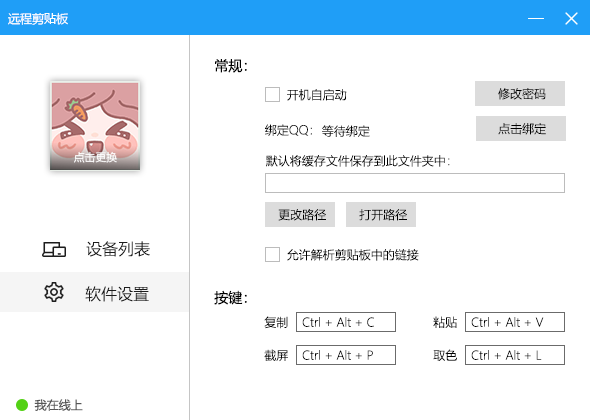
<style>
.page{position:relative;width:590px;height:420px;background:#ffffff}
.page>*{position:absolute;margin:0}
.t1{font:12px "MicrosoftYaHei";color:#ffffff}
.t2{font:14px "MicrosoftYaHei";color:#000000}
.t3{font:12px "MicrosoftYaHeiLight";color:#000000}
.t4{font:10.8px "MicrosoftYaHei";color:#ffffff}
.t5{font:16px "MicrosoftYaHeiLight";color:#1c1c1c}
.t6{font:12px "MicrosoftYaHei";color:#565656}
</style>
<div class="page">
<p class="t1" style="left:8px;top:12px;width:60px;height:13px">远程剪贴板</p>
<p class="t2" style="left:215px;top:59px;width:32px;height:14px">常规：</p>
<p class="t3" style="left:287px;top:89px;width:60px;height:12px">开机自启动</p>
<p class="t3" style="left:498px;top:88px;width:48px;height:12px">修改密码</p>
<p class="t3" style="left:265px;top:124px;width:47px;height:12px">绑定QQ：</p>
<p class="t3" style="left:322px;top:125px;width:48px;height:12px">等待绑定</p>
<p class="t3" style="left:498px;top:123px;width:48px;height:12px">点击绑定</p>
<p class="t4" style="left:74px;top:151px;width:43px;height:12px">点击更换</p>
<p class="t3" style="left:266px;top:155px;width:184px;height:12px">默认将缓存文件保存到此文件夹中：</p>
<p class="t3" style="left:278px;top:209px;width:48px;height:12px">更改路径</p>
<p class="t3" style="left:359px;top:209px;width:48px;height:12px">打开路径</p>
<p class="t5" style="left:86px;top:241px;width:64px;height:16px">设备列表</p>
<p class="t3" style="left:287px;top:249px;width:132px;height:12px">允许解析剪贴板中的链接</p>
<p class="t5" style="left:85px;top:286px;width:64px;height:16px">软件设置</p>
<p class="t2" style="left:214px;top:290px;width:33px;height:15px">按键：</p>
<p class="t3" style="left:264px;top:316px;width:24px;height:13px">复制</p>
<p class="t3" style="left:302px;top:317px;width:72px;height:10px">Ctrl + Alt + C</p>
<p class="t3" style="left:433px;top:316px;width:24px;height:12px">粘贴</p>
<p class="t3" style="left:471px;top:317px;width:73px;height:10px">Ctrl + Alt + V</p>
<p class="t3" style="left:264px;top:349px;width:24px;height:13px">截屏</p>
<p class="t3" style="left:302px;top:350px;width:71px;height:10px">Ctrl + Alt + P</p>
<p class="t3" style="left:433px;top:349px;width:24px;height:12px">取色</p>
<p class="t3" style="left:471px;top:350px;width:71px;height:10px">Ctrl + Alt + L</p>
<p class="t6" style="left:34px;top:399px;width:49px;height:12px">我在线上</p>
</div>
